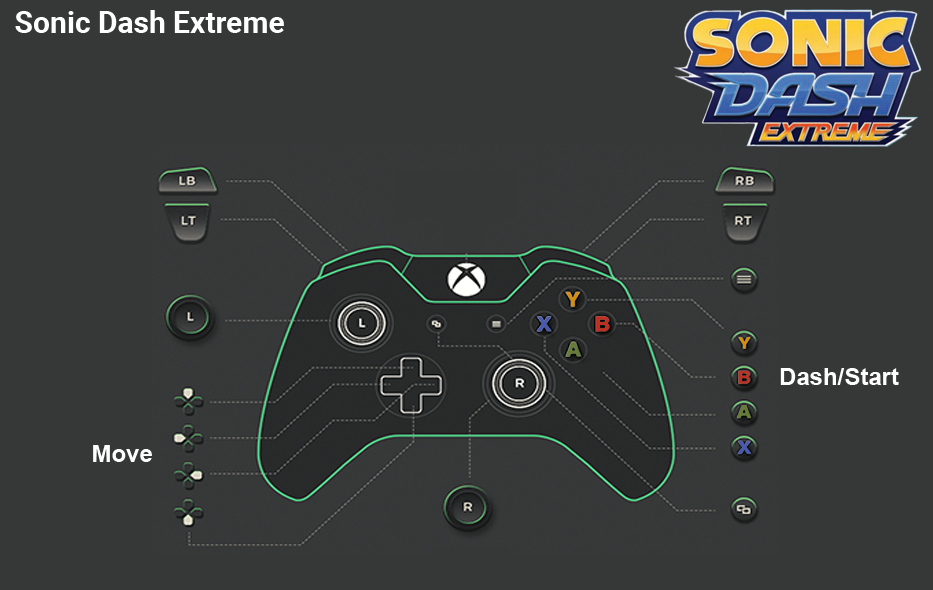
<style>
.page{position:relative;width:933px;height:590px;background:#363838}
.page>*{position:absolute;margin:0}
.t1{font:30px "Roboto-Bold";color:#ffffff}
.t2{font:24px "Arial-BoldMT";color:#fefefe}
</style>
<div class="page">
<p class="t1" style="left:15px;top:10px;width:269px;height:23px">Sonic Dash Extreme</p>
<p class="t2" style="left:780px;top:368px;width:119px;height:17px">Dash/Start</p>
<p class="t2" style="left:93px;top:445px;width:59px;height:17px">Move</p>
</div>
